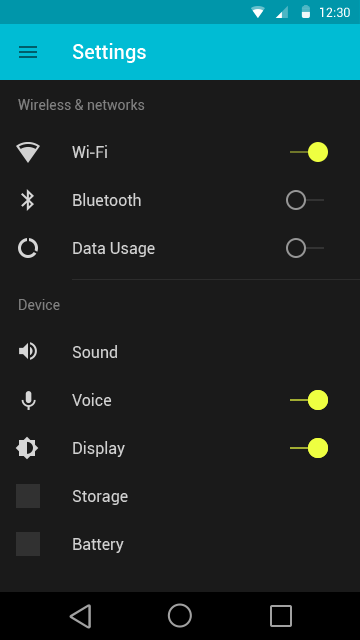
<style>
.page{position:relative;width:360px;height:640px;background:#1a1a1a}
.page>*{position:absolute;margin:0}
.t1{font:12.7px "Roboto-Regular";color:#ffffff}
.t2{font:20px "Roboto-Medium";color:#ffffff}
.t3{font:14px "Roboto-Regular";color:#808080}
.t4{font:16px "Roboto-Regular";color:#d1d1d1}
.t5{font:16px "AdobeHeitiStd-Regular";color:#d1d1d1}
</style>
<div class="page">
<p class="t1" style="left:320px;top:7px;width:30px;height:10px">12:30</p>
<p class="t2" style="left:73px;top:43px;width:73px;height:20px">Settings</p>
<p class="t3" style="left:18px;top:99px;width:127px;height:11px">Wireless &amp; networks</p>
<p class="t4" style="left:72px;top:145px;width:35px;height:13px">Wi<span class="t5">-</span>Fi</p>
<p class="t4" style="left:73px;top:193px;width:68px;height:13px">Bluetooth</p>
<p class="t4" style="left:73px;top:242px;width:82px;height:15px">Data Usage</p>
<p class="t3" style="left:19px;top:299px;width:41px;height:11px">Device</p>
<p class="t4" style="left:72px;top:345px;width:45px;height:13px">Sound</p>
<p class="t4" style="left:72px;top:393px;width:40px;height:13px">Voice</p>
<p class="t4" style="left:73px;top:441px;width:52px;height:16px">Display</p>
<p class="t4" style="left:72px;top:490px;width:56px;height:15px">Storage</p>
<p class="t4" style="left:73px;top:538px;width:51px;height:15px">Battery</p>
</div>
